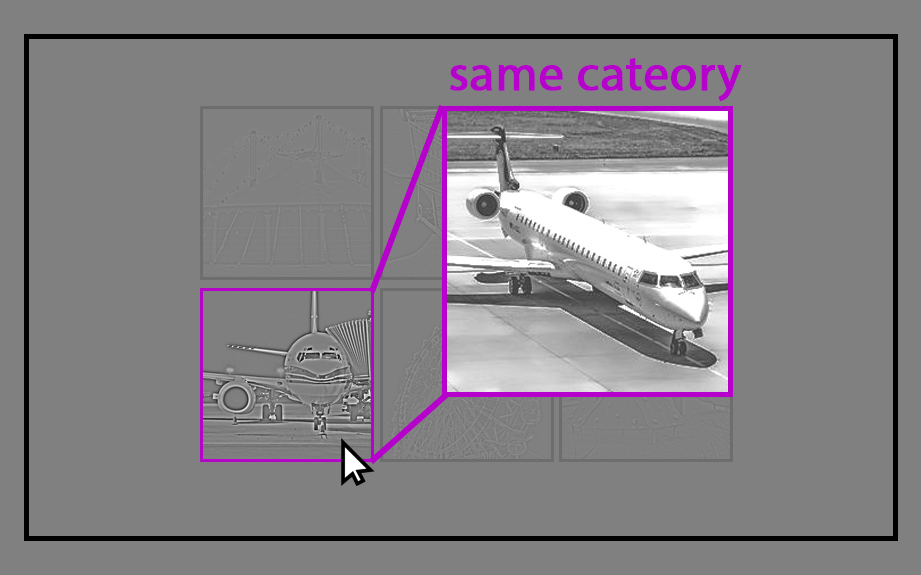
<style>
.page{position:relative;width:921px;height:575px;background:#808080}
.page>*{position:absolute;margin:0}
.t1{font:50px "MyriadPro-Regular";color:#b600cc;font-weight:bold}
</style>
<div class="page">
<p class="t1" style="left:450px;top:58px;width:292px;height:43px">same cateory</p>
</div>
